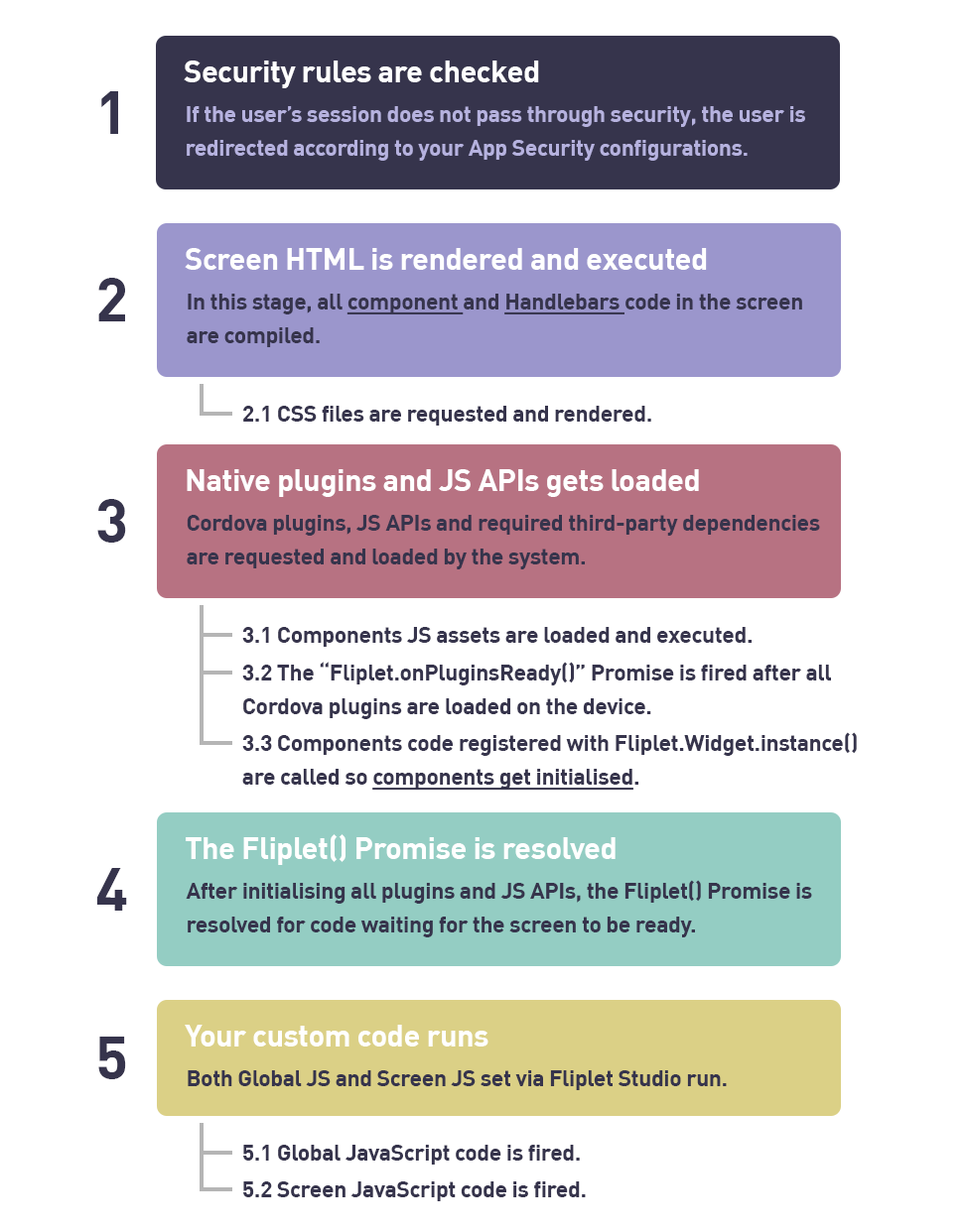
<style>
.page{position:relative;width:968px;height:1232px;background:#ffffff}
.page>*{position:absolute;margin:0}
.t1{font:30.8px "DIN-Bold";letter-spacing:-0.02em;color:#ffffff}
.t2{font:61px "DIN-Bold";letter-spacing:-0.02em;color:#36344c}
.t3{font:22.8px/33.9px "DIN-Bold";letter-spacing:-0.02em;color:#b6b2df}
.t4{font:22.8px/33.9px "DIN-Bold";letter-spacing:-0.02em;color:#36344c}
.t5{font:22.8px/33.9px "DIN-Bold";letter-spacing:-0.02em;color:#36344c;text-decoration:underline}
.t6{font:22.8px "DIN-Bold";letter-spacing:-0.02em;color:#36344c}
</style>
<div class="page">
<p class="t1" style="left:184px;top:61px;width:355px;height:27px">Security rules are checked</p>
<p class="t2" style="left:101px;top:91px;width:17px;height:43px">1</p>
<p class="t3" style="left:187px;top:106px;width:618px;height:55px">If the user’s session does not pass through security, the user is redirected according to your App Security configurations.</p>
<p class="t1" style="left:185px;top:248px;width:522px;height:22px">Screen HTML is rendered and executed</p>
<p class="t2" style="left:98px;top:278px;width:27px;height:44px">2</p>
<p class="t4" style="left:187px;top:294px;width:615px;height:53px">In this stage, all <span class="t5">component </span>and <span class="t5">Handlebars </span>code in the screen are compiled.</p>
<p class="t6" style="left:243px;top:406px;width:408px;height:20px">2.1 CSS files are requested and rendered.</p>
<p class="t1" style="left:187px;top:469px;width:512px;height:28px">Native plugins and JS APIs gets loaded</p>
<p class="t2" style="left:97px;top:499px;width:29px;height:44px">3</p>
<p class="t4" style="left:187px;top:515px;width:633px;height:55px">Cordova plugins, JS APIs and required third-party dependencies are requested and loaded by the system.</p>
<p class="t6" style="left:242px;top:627px;width:509px;height:20px">3.1 Components JS assets are loaded and executed.</p>
<p class="t4" style="left:242px;top:662px;width:589px;height:57px">3.2 The “Fliplet.onPluginsReady()” Promise is fired after all Cordova plugins are loaded on the device.</p>
<p class="t4" style="left:242px;top:732px;width:614px;height:59px">3.3 Components code registered with Fliplet.Widget.instance()<br>are called so <span class="t5">components get initialised</span>.</p>
<p class="t1" style="left:186px;top:835px;width:429px;height:30px">The Fliplet() Promise is resolved</p>
<p class="t2" style="left:96px;top:868px;width:31px;height:43px">4</p>
<p class="t4" style="left:186px;top:880px;width:626px;height:58px">After initialising all plugins and JS APIs, the Fliplet() Promise is resolved for code waiting for the screen to be ready.</p>
<p class="t1" style="left:185px;top:1025px;width:303px;height:22px">Your custom code runs</p>
<p class="t2" style="left:98px;top:1037px;width:28px;height:43px">5</p>
<p class="t6" style="left:188px;top:1071px;width:538px;height:20px">Both Global JS and Screen JS set via Fliplet Studio run.</p>
<p class="t6" style="left:243px;top:1145px;width:337px;height:20px">5.1 Global JavaScript code is fired.</p>
<p class="t6" style="left:243px;top:1182px;width:342px;height:20px">5.2 Screen JavaScript code is fired.</p>
</div>
